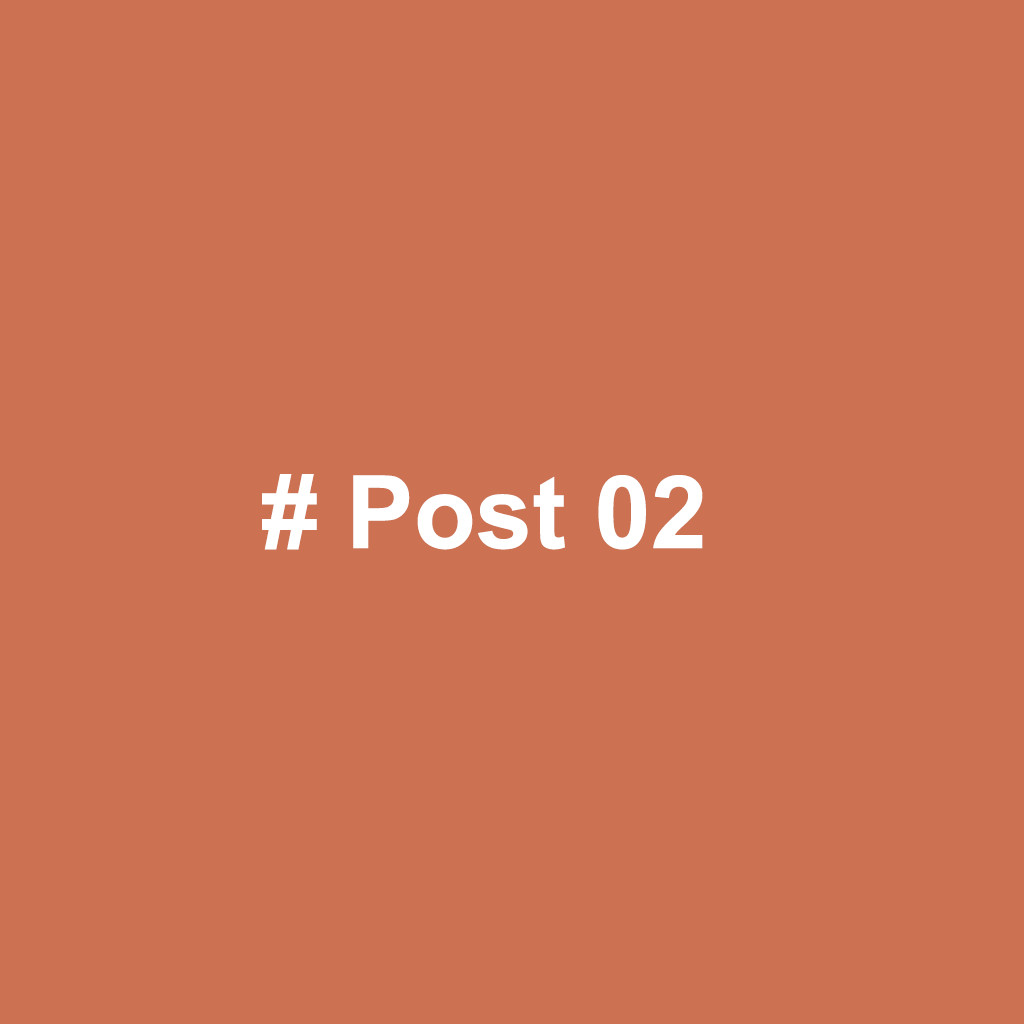
<style>
.page{position:relative;width:1024px;height:1024px;background:#cc7151}
.page>*{position:absolute;margin:0}
.t1{font:101.6px "Arial-BoldMT";color:#ffffff}
</style>
<div class="page">
<p class="t1" style="left:262px;top:474px;width:441px;height:76px"># Post 02</p>
</div>
